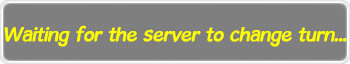
<style>
.page{position:relative;width:350px;height:64px;background:#7f7f7f}
.page>*{position:absolute;margin:0}
.t1{font:21px "GosmickSans";letter-spacing:-0.025em;color:#ffff00;font-weight:bold;font-style:italic}
</style>
<div class="page">
<p class="t1" style="left:4px;top:25px;width:343px;height:22px">Waiting for the server to change turn...</p>
</div>
